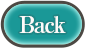
<style>
.page{position:relative;width:85px;height:48px}
.page>*{position:absolute;margin:0}
.t1{font:22px "RyuminPro-ExBold";letter-spacing:-0.08em;color:#fdfbf9}
</style>
<div class="page">
<p class="t1" style="left:19px;top:16px;width:47px;height:17px">Back</p>
</div>
